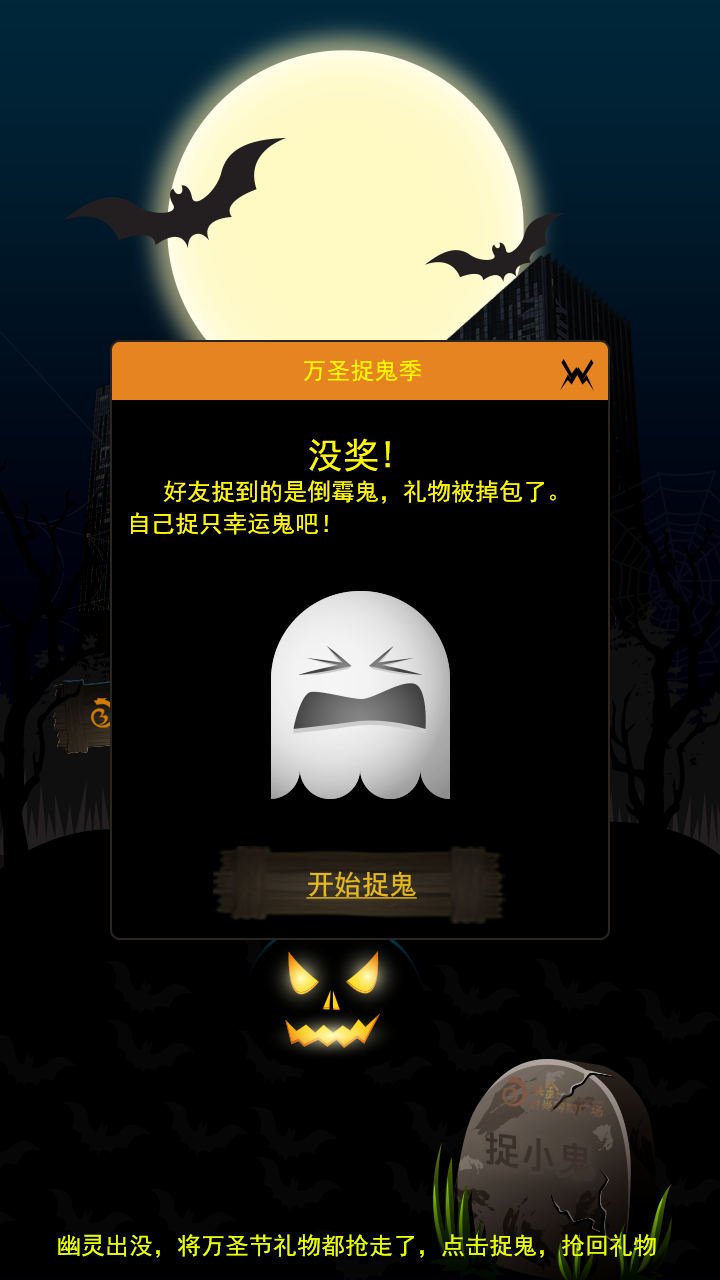
<style>
.page{position:relative;width:720px;height:1280px;background:#000000}
.page>*{position:absolute;margin:0}
.t1{font:24px "SimHei";color:#fff600}
.t2{font:24px/37.3px "SimHei";color:#fff600}
.t3{font:30px/37.3px "SimHei";color:#fff600}
.t4{font:36px/37.3px "SimHei";color:#fff600}
.t5{font:27.6px "SimHei";color:#e5b91d;text-decoration:underline}
</style>
<div class="page">
<p class="t1" style="left:304px;top:359px;width:118px;height:23px">万圣捉鬼季</p>
<p class="t2" style="left:131px;top:438px;width:425px;height:97px"><span class="t3">    </span><span class="t4"> 没奖!<br> </span>好友捉到的是倒霉鬼，礼物被掉包了。自己捉只幸运鬼吧！</p>
<p class="t5" style="left:306px;top:871px;width:111px;height:28px">开始捉鬼</p>
</div>
